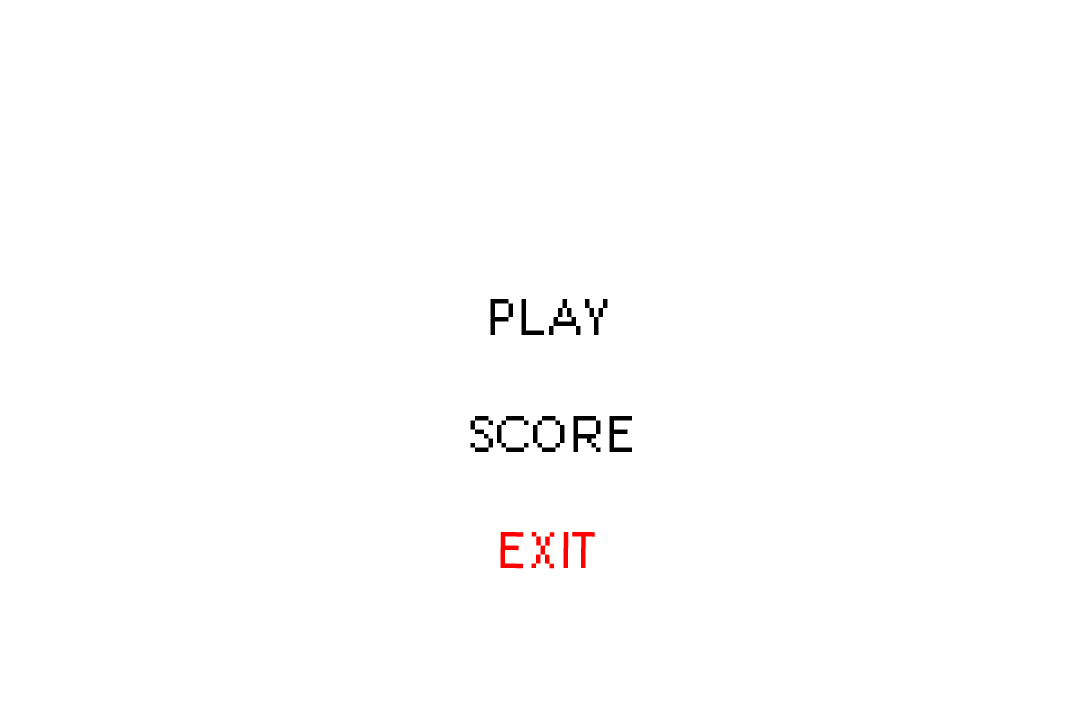
<style>
.page{position:relative;width:1080px;height:720px;background:#ffffff}
.page>*{position:absolute;margin:0}
.t1{font:72px "PixellettersFull";color:#000000}
.t2{font:72px "PixellettersFull";color:#ff0000}
</style>
<div class="page">
<p class="t1" style="left:490px;top:299px;width:118px;height:36px">PLAY</p>
<p class="t1" style="left:470px;top:416px;width:162px;height:36px">SCORE</p>
<p class="t2" style="left:500px;top:532px;width:95px;height:37px">EXIT</p>
</div>
